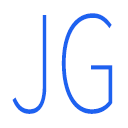
<style>
.page{position:relative;width:128px;height:128px;background:#ffffff}
.page>*{position:absolute;margin:0}
.t1{font:146.7px "SourceSansPro-ExtraLight";color:#1d62f0;scale:0.73 1}
</style>
<div class="page">
<p class="t1" style="left:12px;top:13px;width:101px;height:101px">JG</p>
</div>
